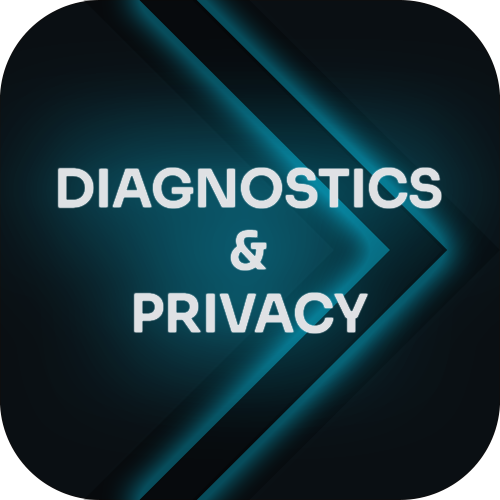
<style>
.page{position:relative;width:500px;height:500px}
.page>*{position:absolute;margin:0}
.t1{font:52.1px "Sora-SemiBold";color:#dfe1e4}
</style>
<div class="page">
<p class="t1" style="left:58px;top:168px;width:383px;height:165px;text-align:center">DIAGNOSTICS<br>&amp;<br>PRIVACY</p>
</div>
